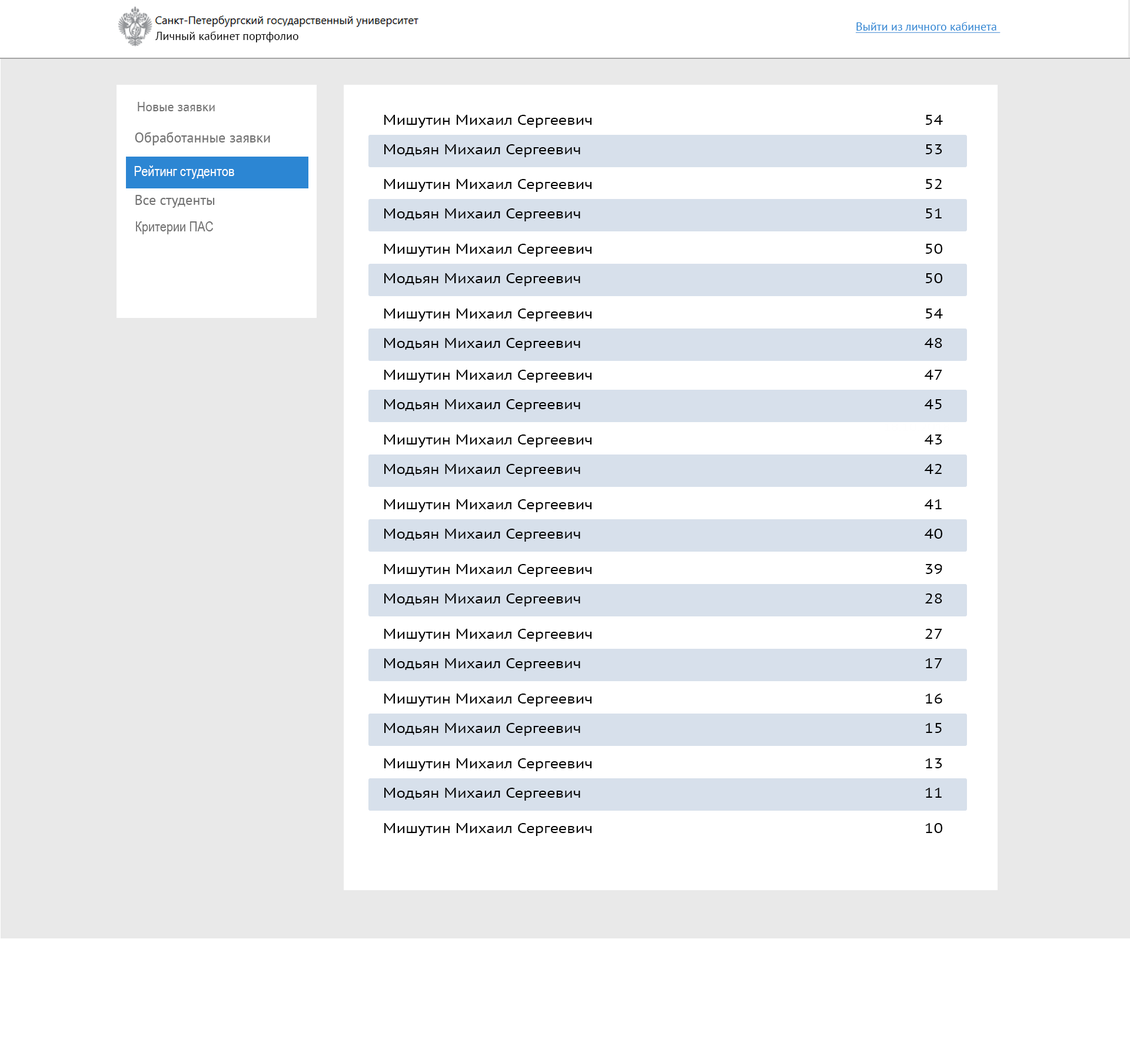
<style>
.page{position:relative;width:1130px;height:1055px;background:#ffffff}
.page>*{position:absolute;margin:0}
.t1{font:11.8px "PTSans-Regular";color:#2c86d3;text-decoration:underline}
.t2{font:11.8px "PTSans-Regular";color:#060606}
.t3{font:13px "PTSans-Regular";color:#727272}
.t4{font:14.1px "PTSans-Regular";color:#000000;scale:1.19 1}
.t5{font:14.1px "PTSans-Regular";color:#727272}
.t6{font:14.1px "ArialNarrow";color:#ffffff}
.t7{font:14.1px "ArialNarrow";color:#727272}
</style>
<div class="page">
<p class="t1" style="left:856px;top:22px;width:145px;height:11px">Выйти из личного кабинета</p>
<p class="t2" style="left:155px;top:31px;width:143px;height:11px">Личный кабинет портфолио</p>
<p class="t3" style="left:138px;top:102px;width:77px;height:9px">Новые заявки</p>
<p class="t4" style="left:384px;top:115px;width:208px;height:13px">Мишутин Михаил Сергеевич</p>
<p class="t4" style="left:925px;top:115px;width:18px;height:10px">54</p>
<p class="t5" style="left:135px;top:132px;width:135px;height:13px">Обработанные заявки</p>
<p class="t4" style="left:384px;top:144px;width:196px;height:13px">Модьян Михаил Сергеевич</p>
<p class="t4" style="left:925px;top:144px;width:18px;height:10px">53</p>
<p class="t6" style="left:134px;top:165px;width:100px;height:14px">Рейтинг студентов</p>
<p class="t4" style="left:384px;top:179px;width:208px;height:13px">Мишутин Михаил Сергеевич</p>
<p class="t4" style="left:925px;top:179px;width:17px;height:10px">52</p>
<p class="t5" style="left:135px;top:195px;width:80px;height:13px">Все студенты</p>
<p class="t4" style="left:384px;top:208px;width:196px;height:13px">Модьян Михаил Сергеевич</p>
<p class="t4" style="left:925px;top:208px;width:17px;height:10px">51</p>
<p class="t7" style="left:136px;top:221px;width:77px;height:13px">Критерии ПАС</p>
<p class="t4" style="left:384px;top:244px;width:208px;height:13px">Мишутин Михаил Сергеевич</p>
<p class="t4" style="left:925px;top:244px;width:18px;height:10px">50</p>
<p class="t4" style="left:384px;top:273px;width:196px;height:13px">Модьян Михаил Сергеевич</p>
<p class="t4" style="left:925px;top:273px;width:18px;height:10px">50</p>
<p class="t4" style="left:384px;top:308px;width:208px;height:13px">Мишутин Михаил Сергеевич</p>
<p class="t4" style="left:925px;top:308px;width:18px;height:10px">54</p>
<p class="t4" style="left:384px;top:338px;width:196px;height:13px">Модьян Михаил Сергеевич</p>
<p class="t4" style="left:925px;top:338px;width:18px;height:10px">48</p>
<p class="t4" style="left:384px;top:370px;width:208px;height:13px">Мишутин Михаил Сергеевич</p>
<p class="t4" style="left:925px;top:370px;width:18px;height:10px">47</p>
<p class="t4" style="left:384px;top:399px;width:196px;height:13px">Модьян Михаил Сергеевич</p>
<p class="t4" style="left:925px;top:399px;width:17px;height:10px">45</p>
<p class="t4" style="left:384px;top:434px;width:208px;height:13px">Мишутин Михаил Сергеевич</p>
<p class="t4" style="left:925px;top:434px;width:18px;height:10px">43</p>
<p class="t4" style="left:384px;top:464px;width:196px;height:13px">Модьян Михаил Сергеевич</p>
<p class="t4" style="left:925px;top:464px;width:17px;height:10px">42</p>
<p class="t4" style="left:384px;top:499px;width:208px;height:13px">Мишутин Михаил Сергеевич</p>
<p class="t4" style="left:925px;top:499px;width:17px;height:10px">41</p>
<p class="t4" style="left:384px;top:529px;width:196px;height:13px">Модьян Михаил Сергеевич</p>
<p class="t4" style="left:925px;top:529px;width:18px;height:10px">40</p>
<p class="t4" style="left:384px;top:564px;width:208px;height:13px">Мишутин Михаил Сергеевич</p>
<p class="t4" style="left:926px;top:564px;width:17px;height:10px">39</p>
<p class="t4" style="left:384px;top:593px;width:196px;height:13px">Модьян Михаил Сергеевич</p>
<p class="t4" style="left:925px;top:593px;width:18px;height:10px">28</p>
<p class="t4" style="left:384px;top:629px;width:208px;height:13px">Мишутин Михаил Сергеевич</p>
<p class="t4" style="left:925px;top:629px;width:18px;height:10px">27</p>
<p class="t4" style="left:384px;top:658px;width:196px;height:13px">Модьян Михаил Сергеевич</p>
<p class="t4" style="left:925px;top:658px;width:18px;height:10px">17</p>
<p class="t4" style="left:384px;top:693px;width:208px;height:13px">Мишутин Михаил Сергеевич</p>
<p class="t4" style="left:925px;top:693px;width:18px;height:11px">16</p>
<p class="t4" style="left:384px;top:723px;width:196px;height:13px">Модьян Михаил Сергеевич</p>
<p class="t4" style="left:925px;top:723px;width:17px;height:10px">15</p>
<p class="t4" style="left:384px;top:758px;width:208px;height:13px">Мишутин Михаил Сергеевич</p>
<p class="t4" style="left:925px;top:758px;width:18px;height:10px">13</p>
<p class="t4" style="left:384px;top:788px;width:196px;height:13px">Модьян Михаил Сергеевич</p>
<p class="t4" style="left:925px;top:788px;width:17px;height:10px">11</p>
<p class="t4" style="left:384px;top:823px;width:208px;height:13px">Мишутин Михаил Сергеевич</p>
<p class="t4" style="left:925px;top:823px;width:18px;height:10px">10</p>
</div>
